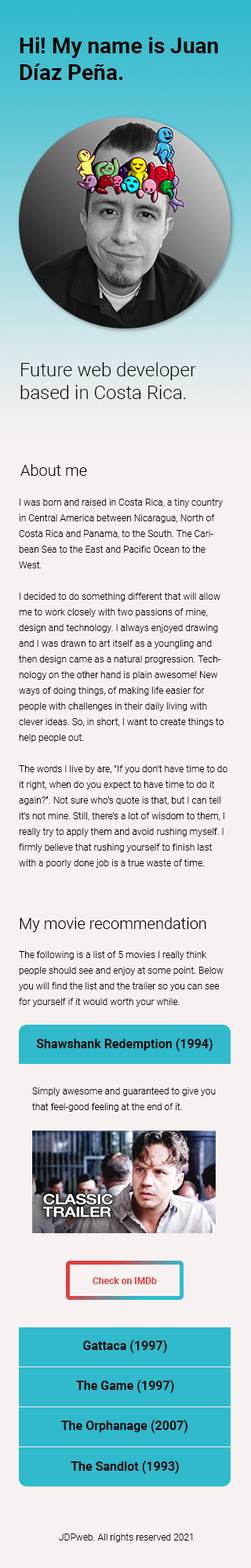
<style>
.page{position:relative;width:251px;height:1568px;background:#f8f1f1}
.page>*{position:absolute;margin:0}
.t1{font:22px "Roboto-Bold";color:#070303}
.t2{font:18.8px "Roboto-Light";color:#070303}
.t3{font:15.7px "Roboto-Light";color:#070303}
.t4{font:9.4px/15.7px "Roboto-Light";color:#070303}
.t5{font:9.4px "Roboto-Bold";color:#dc4040}
.t6{font:9.4px "Roboto-Light";color:#070303}
</style>
<div class="page">
<p class="t1" style="left:20px;top:37px;width:198px;height:43px">Hi! My name is Juan Díaz Peña.</p>
<p class="t2" style="left:20px;top:362px;width:176px;height:37px">Future web developer based in Costa Rica.</p>
<p class="t3" style="left:20px;top:464px;width:67px;height:12px">About me</p>
<p class="t4" style="left:19px;top:499px;width:208px;height:369px">I was born and raised in Costa Rica, a tiny country in Central America between Nicaragua, North of Costa Rica and Panama, to the South. The Caribean Sea to the East and Pacific Ocean to the West.<br><br>I decided to do something different that will allow me to work closely with two passions of mine, design and technology. I always enjoyed drawing and I was drawn to art itself as a youngling and then design came as a natural progression. Technology on the other hand is plain awesome! New ways of doing things, of making life easier for people with challenges in their daily living with clever ideas. So, in short, I want to create things to help people out.<br><br>The words I live by are, “If you don’t have time to do it right, when do you expect to have time to do it again?”. Not sure who’s quote is that, but I can tell it’s not mine. Still, there’s a lot of wisdom to them, I really try to apply them and avoid rushing myself. I firmly believe that rushing yourself to finish last with a poorly done job is a true waste of time.</p>
<p class="t3" style="left:20px;top:917px;width:186px;height:15px">My movie recommendation</p>
<p class="t4" style="left:19px;top:951px;width:204px;height:56px">The following is a list of 5 movies I really think people should see and enjoy at some point. Below you will find the list and the trailer so you can see for yourself if it would worth your while.</p>
<p class="t4" style="left:32px;top:1087px;width:184px;height:25px">Simply awesome and guaranteed to give you that feel-good feeling at the end of it.</p>
<p class="t5" style="left:93px;top:1277px;width:64px;height:7px">Check on IMDb</p>
<p class="t6" style="left:59px;top:1534px;width:134px;height:8px">JDPweb. All rights reserved 2021</p>
</div>
